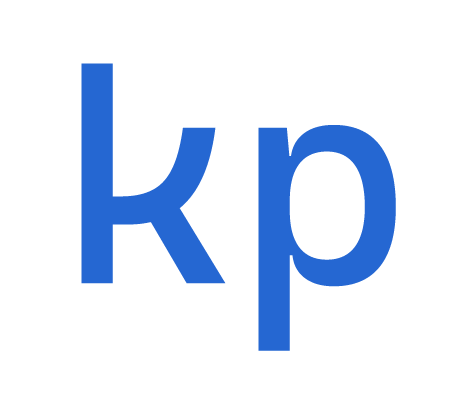
<style>
.page{position:relative;width:470px;height:405px;background:#ffffff}
.page>*{position:absolute;margin:0}
.t1{font:300px "CascadiaMono-Regular";color:#2567d2}
</style>
<div class="page">
<p class="t1" style="left:81px;top:63px;width:315px;height:288px">kp</p>
</div>
